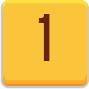
<style>
.page{position:relative;width:89px;height:89px;background:#fbc53b}
.page>*{position:absolute;margin:0}
.t1{font:60px "LibelSuitRg-Regular";color:#662312}
</style>
<div class="page">
<p class="t1" style="left:38px;top:14px;width:12px;height:47px">1</p>
</div>
